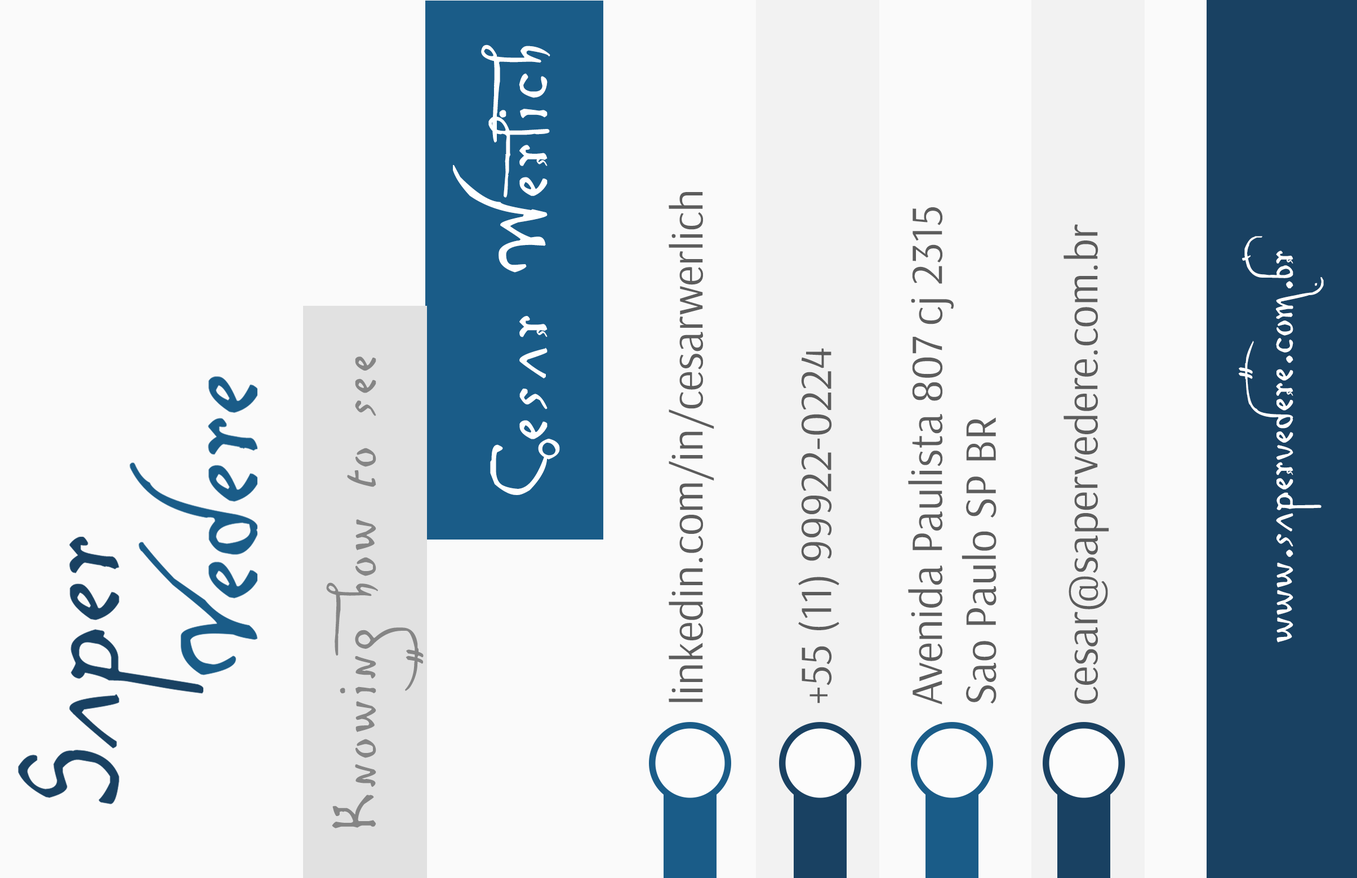
<style>
.page{position:relative;width:1357px;height:878px;background:#fafafa}
.page>*{position:absolute;margin:0}
.t1{font:112.7px "LeonardoHandF";letter-spacing:0.05em;color:#feffff}
.t2{font:44.8px "Arsenal-Regular";color:#5c5c5c}
.t3{font:67.6px "LeonardoHandF";color:#feffff}
.t4{font:44.7px "Arsenal-Regular";color:#5c5c5c}
.t5{font:84.5px "LeonardoHandF";letter-spacing:0.05em;color:#858585}
</style>
<div class="page">
<p class="t1" style="left:453px;top:45px;width:107px;height:450px;rotate:-90deg">Cesar Werlich</p>
<p class="t2" style="left:669px;top:192px;width:45px;height:511px;rotate:-90deg">linkedin.com/in/cesarwerlich</p>
<p class="t2" style="left:908px;top:207px;width:89px;height:498px;rotate:-90deg">Avenida Paulista 807 cj 2315 <br>Sao Paulo SP BR</p>
<p class="t2" style="left:1064px;top:224px;width:45px;height:480px;rotate:-90deg">cesar@sapervedere.com.br</p>
<p class="t3" style="left:1239px;top:236px;width:85px;height:407px;rotate:-90deg">www.sapervedere.com.br</p>
<p class="t4" style="left:798px;top:348px;width:42px;height:356px;rotate:-90deg">+55 (11) 99922-0224</p>
<p class="t5" style="left:326px;top:357px;width:98px;height:472px;rotate:-90deg">Knowing how to see</p>
</div>
